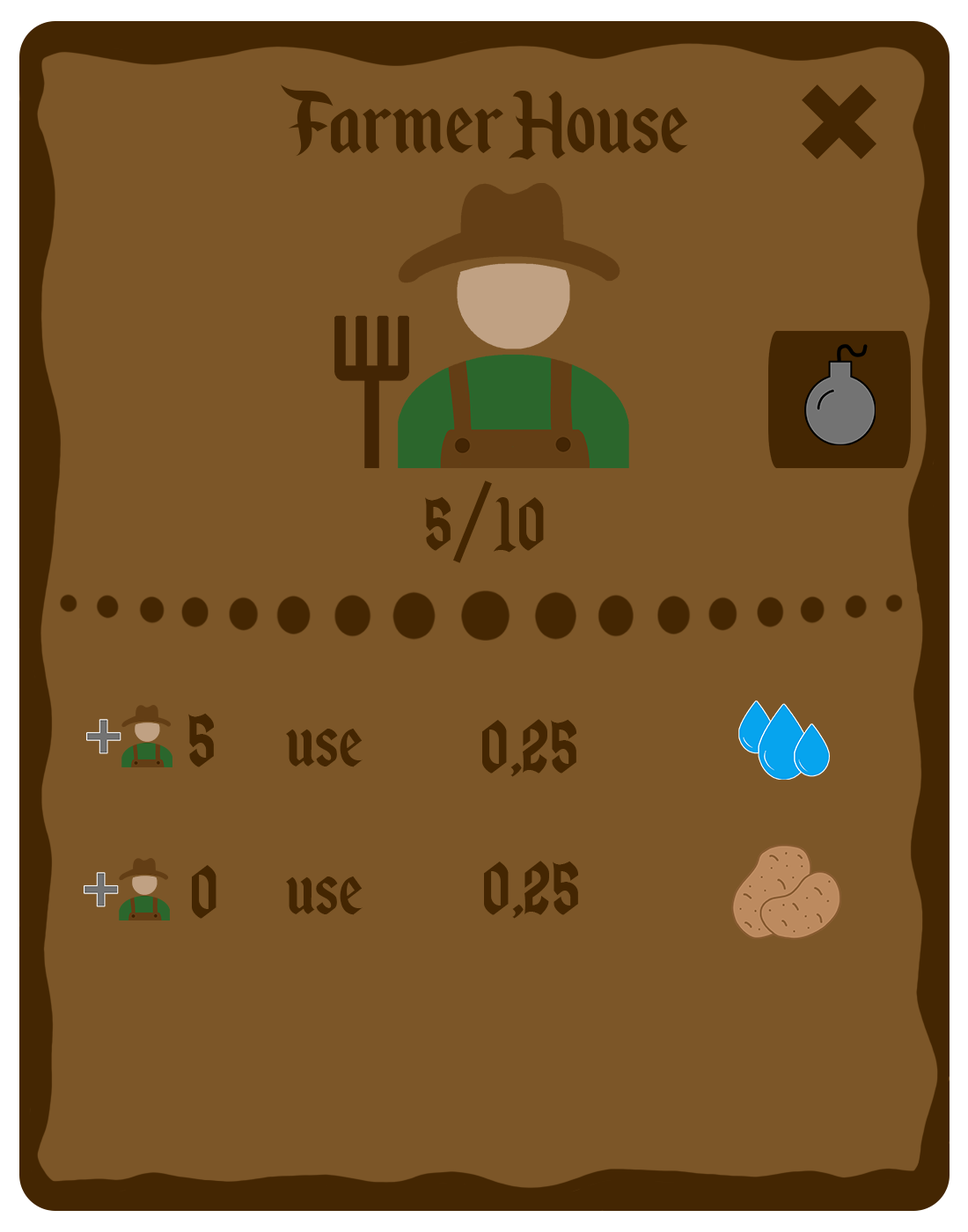
<style>
.page{position:relative;width:968px;height:1232px;background:#7c5628}
.page>*{position:absolute;margin:0}
.t1{font:105.6px "EnchantedLand";color:#442602}
.t2{font:88px "EnchantedLand";color:#442602}
</style>
<div class="page">
<p class="t1" style="left:281px;top:84px;width:407px;height:76px">Farmer House</p>
<p class="t2" style="left:425px;top:480px;width:119px;height:83px">5/10</p>
<p class="t2" style="left:188px;top:713px;width:26px;height:54px">5</p>
<p class="t2" style="left:482px;top:719px;width:94px;height:58px">0,25</p>
<p class="t2" style="left:286px;top:729px;width:77px;height:38px">use</p>
<p class="t2" style="left:192px;top:865px;width:24px;height:54px">0</p>
<p class="t2" style="left:484px;top:861px;width:94px;height:58px">0,25</p>
<p class="t2" style="left:286px;top:876px;width:77px;height:39px">use</p>
</div>
